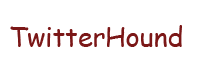
<style>
.page{position:relative;width:200px;height:75px;background:#ffffff}
.page>*{position:absolute;margin:0}
.t1{font:26.7px "ComicSansMS";color:#7b1717}
</style>
<div class="page">
<p class="t1" style="left:10px;top:25px;width:172px;height:22px">TwitterHound</p>
</div>
